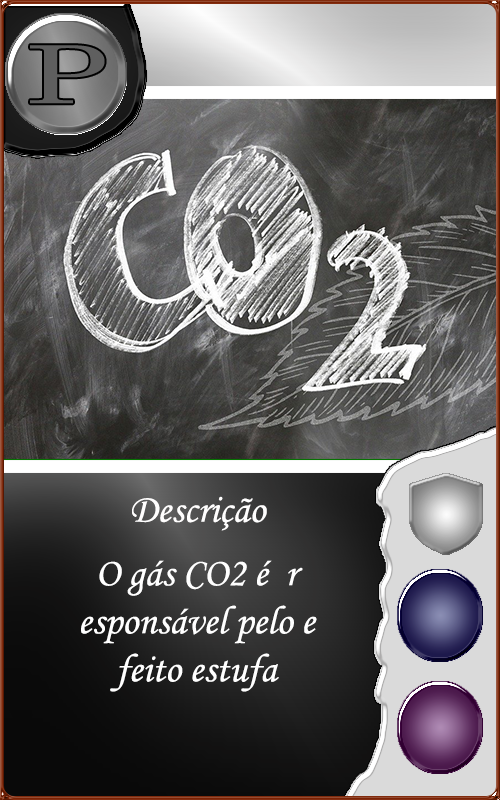
<style>
.page{position:relative;width:500px;height:800px}
.page>*{position:absolute;margin:0}
.t1{font:40px "MonotypeCorsiva";color:#fffefe}
.t2{font:40px "MonotypeCorsiva";color:#ffffff}
</style>
<div class="page">
<p class="t1" style="left:132px;top:496px;width:135px;height:35px">Descrição</p>
<p class="t2" style="left:81px;top:560px;width:236px;height:132px;text-align:center">O gás CO2 é  r<br>esponsável pelo e<br>feito estufa</p>
</div>
